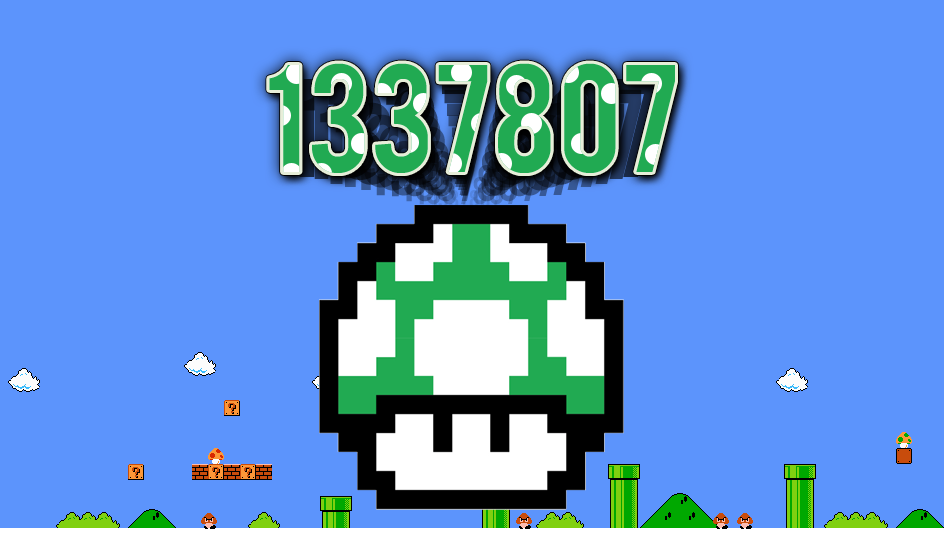
<style>
.page{position:relative;width:944px;height:544px;background:#5c94fc}
.page>*{position:absolute;margin:0}
.t1{font:120px "Bebas";color:#21aa52}
</style>
<div class="page">
<p class="t1" style="left:269px;top:63px;width:406px;height:110px">1337807</p>
</div>
